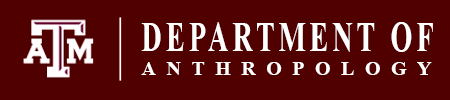
<style>
.page{position:relative;width:450px;height:100px;background:#510000}
.page>*{position:absolute;margin:0}
.t1{font:42px "TimesNewRomanPS-BoldMT";letter-spacing:0.15em;color:#ffffff;scale:0.67 1}
.t2{font:20px "TimesNewRomanPS-BoldMT";letter-spacing:0.525em;color:#ffffff}
</style>
<div class="page">
<p class="t1" style="left:141px;top:22px;width:292px;height:53px">DEPARTMENT OF<br><span class="t2">ANTHROPOLOGY</span></p>
</div>
